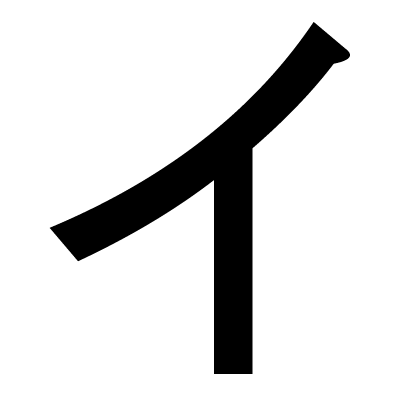
<style>
.page{position:relative;width:400px;height:400px;background:#ffffff}
.page>*{position:absolute;margin:0}
.t1{font:424.8px "MS-PGothic";color:#000000}
</style>
<div class="page">
<p class="t1" style="left:49px;top:22px;width:301px;height:352px">イ</p>
</div>
